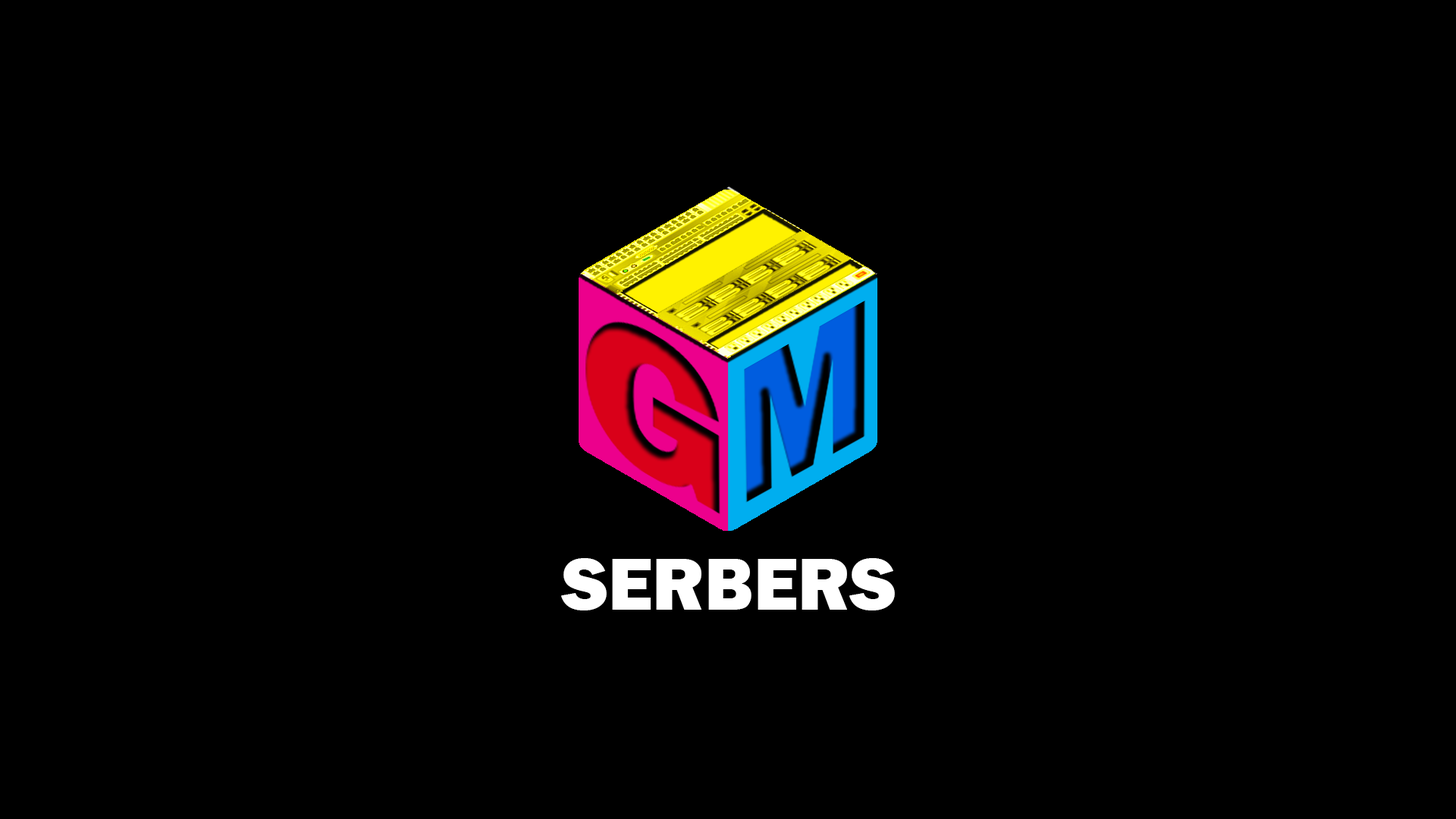
<style>
.page{position:relative;width:1456px;height:819px;background:#000000}
.page>*{position:absolute;margin:0}
.t1{font:75.8px "FranklinGothic-Heavy";color:#ffffff}
</style>
<div class="page">
<p class="t1" style="left:561px;top:558px;width:334px;height:52px">SERBERS</p>
</div>
